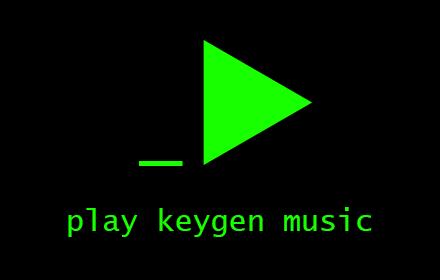
<style>
.page{position:relative;width:440px;height:280px;background:#000000}
.page>*{position:absolute;margin:0}
.t1{font:72px "LucidaConsole";color:#18ff00}
.t2{font:30px "LucidaConsole";color:#18ff00}
</style>
<div class="page">
<p class="t1" style="left:139px;top:161px;width:44px;height:5px">_</p>
<p class="t2" style="left:68px;top:207px;width:304px;height:30px">play keygen music</p>
</div>
